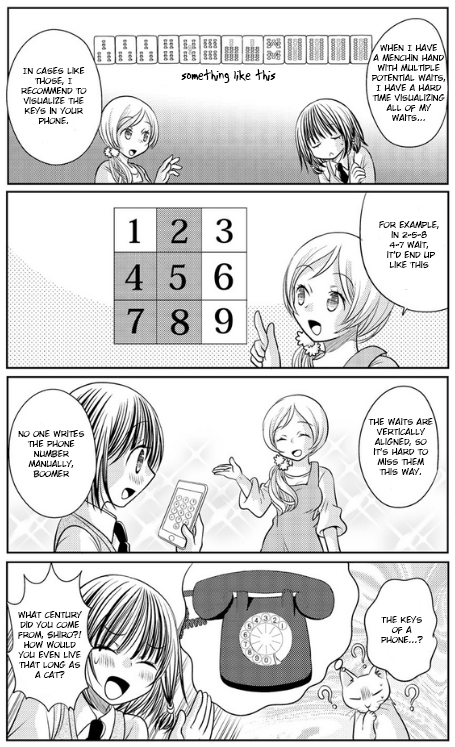
<style>
.page{position:relative;width:455px;height:747px;background:#ffffff}
.page>*{position:absolute;margin:0}
.t1{font:8.3px "WildWordsRoman";color:#000000}
.t2{font:16.7px "Another";color:#000000}
</style>
<div class="page">
<p class="t1" style="left:371px;top:44px;width:75px;height:77px;text-align:center">When I have <br>a Menchin hand with multiple potential waits, I have a hard time visualizing all of my waits...</p>
<p class="t1" style="left:21px;top:67px;width:66px;height:57px;text-align:center">In cases like those, I recommend to visualize the keys in your phone.</p>
<p class="t2" style="left:181px;top:69px;width:95px;height:14px">something like this</p>
<p class="t1" style="left:379px;top:221px;width:60px;height:47px;text-align:center">For example, in 2-5-8 <br>4-7 wait,<br> it'd end up like this</p>
<p class="t1" style="left:368px;top:418px;width:65px;height:57px;text-align:center">The waits are vertically aligned, so it's hard to miss them this way.</p>
<p class="t1" style="left:18px;top:430px;width:67px;height:48px;text-align:center">no one writes the phone  number manually, boomer</p>
<p class="t1" style="left:18px;top:611px;width:64px;height:67px;text-align:center">What century did you come from, Shiro?! How would you even live that long as a cat?</p>
<p class="t1" style="left:381px;top:616px;width:42px;height:27px;text-align:center">The keys of a phone...?</p>
</div>
